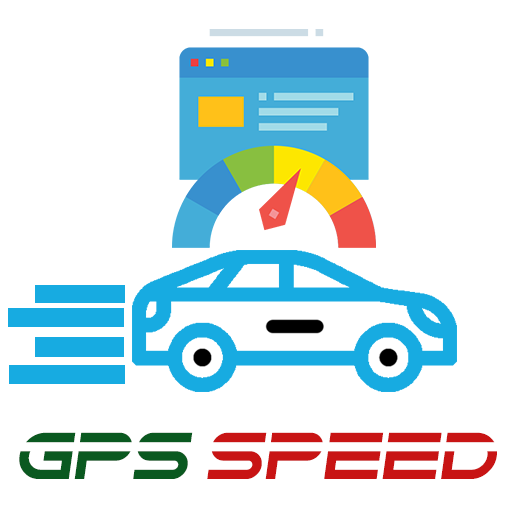
<style>
.page{position:relative;width:512px;height:512px;background:#ffffff}
.page>*{position:absolute;margin:0}
.t1{font:63px "SpeedeasySpeedy";color:#c81414}
.t2{font:63px "SpeedeasySpeedy";color:#0a5920}
</style>
<div class="page">
<p class="t1" style="left:19px;top:432px;width:478px;height:47px"><span class="t2">GPS </span>SPEED</p>
</div>
